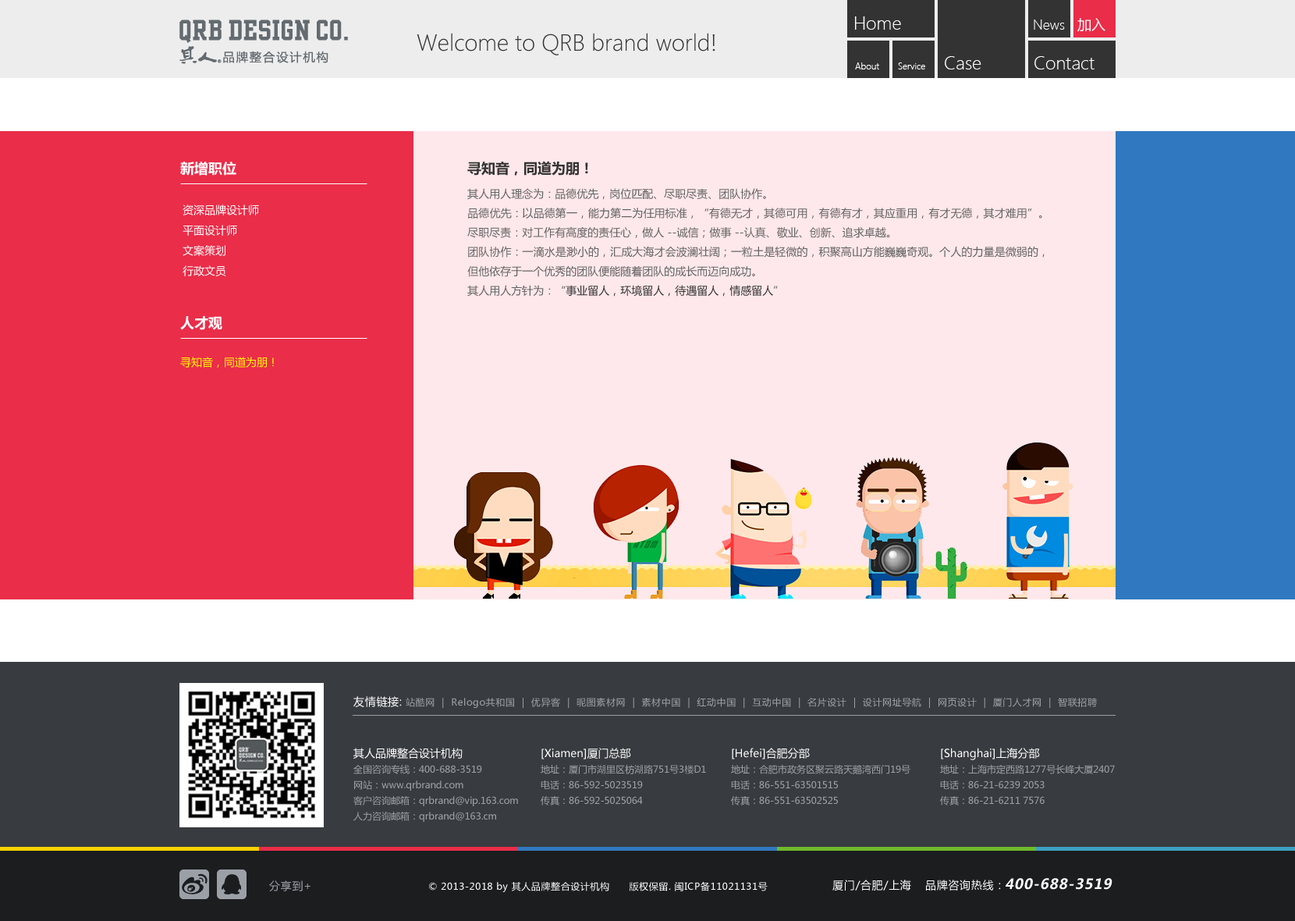
<style>
.page{position:relative;width:1295px;height:921px}
.page>*{position:absolute;margin:0}
.t1{font:18.7px "SegoeUI-Light";color:#ffffff}
.t2{font:14px "MicrosoftYaHei";color:#ffffff}
.t3{font:14px "SegoeUI-Light";color:#ffffff}
.t4{font:23.4px "SegoeUI-Light";color:#333333}
.t5{font:9.4px "SegoeUI-Light";color:#ffffff}
.t6{font:14px "MicrosoftYaHei-Bold";color:#ffffff}
.t7{font:14px "MicrosoftYaHei-Bold";color:#333333}
.t8{font:10.9px/19.3px "MicrosoftYaHei";color:#646464}
.t9{font:10.9px/19.3px "MicrosoftYaHei";color:#333333}
.t10{font:10.9px/20.3px "MicrosoftYaHei";color:#ffffff}
.t11{font:10.9px "MicrosoftYaHei";color:#ffff00}
.t12{font:9.4px "MicrosoftYaHei";letter-spacing:0.05em;color:#9ba0a7}
.t13{font:10.9px "MicrosoftYaHei";letter-spacing:0.05em;color:#ffffff}
.t14{font:9.4px/15.6px "MicrosoftYaHei";color:#9ba0a7}
.t15{font:10.9px/15.6px "MicrosoftYaHei";color:#ffffff}
.t16{font:10.9px "MicrosoftYaHei";letter-spacing:0.05em;color:#9ba0a7}
.t17{font:9.4px "MicrosoftYaHei";letter-spacing:0.05em;color:#ffffff}
.t18{font:14px "MicrosoftYaHei-Bold";letter-spacing:0.05em;color:#ffffff;font-style:italic}
</style>
<div class="page">
<p class="t1" style="left:855px;top:16px;width:46px;height:14px">Home</p>
<p class="t2" style="left:1077px;top:18px;width:29px;height:14px">加入</p>
<p class="t3" style="left:1034px;top:20px;width:31px;height:10px">News</p>
<p class="t4" style="left:417px;top:33px;width:298px;height:22px">Welcome to QRB brand world!</p>
<p class="t5" style="left:855px;top:62px;width:24px;height:7px">About</p>
<p class="t5" style="left:898px;top:62px;width:27px;height:7px">Service</p>
<p class="t1" style="left:945px;top:56px;width:37px;height:13px">Case</p>
<p class="t1" style="left:1035px;top:56px;width:60px;height:13px">Contact</p>
<p class="t6" style="left:180px;top:162px;width:56px;height:14px">新增职位</p>
<p class="t7" style="left:467px;top:161px;width:121px;height:15px">寻知音，同道为朋！</p>
<p class="t8" style="left:467px;top:188px;width:578px;height:108px;text-align:justify">其人用人理念为：品德优先，岗位匹配、尽职尽责、团队协作。<br>品德优先：以品德第一，能力第二为任用标准，“有德无才，其德可用，有德有才，其应重用，有才无德，其才难用”。尽职尽责：对工作有高度的责任心，做人 --诚信；做事 --认真、敬业、创新、追求卓越。<br>团队协作：一滴水是渺小的，汇成大海才会波澜壮阔；一粒土是轻微的，积聚高山方能巍巍奇观。个人的力量是微弱的，但他依存于一个优秀的团队便能随着团队的成长而迈向成功。<br>其人用人方针为：“<span class="t9">事业留人，环境留人，待遇留人，情感留人</span>”</p>
<p class="t10" style="left:183px;top:204px;width:76px;height:72px">资深品牌设计师<br>平面设计师<br>文案策划<br>行政文员</p>
<p class="t6" style="left:180px;top:316px;width:42px;height:14px">人才观</p>
<p class="t11" style="left:180px;top:357px;width:94px;height:10px">寻知音，同道为朋！</p>
<p class="t12" style="left:353px;top:696px;width:744px;height:12px"><span class="t13">友情链接: </span>站酷网  |  Relogo共和国  |  优异客  |  昵图素材网  |  素材中国  |  红动中国  |  互动中国  |  名片设计  |  设计网址导航  |  网页设计  |  厦门人才网  |  智联招聘</p>
<p class="t14" style="left:353px;top:747px;width:165px;height:75px"><span class="t15">其人品牌整合设计机构<br></span>全国咨询专线：400-688-3519<br>网站：www.qrbrand.com<br>客户咨询邮箱：qrbrand@vip.163.com<br>人力咨询邮箱：qrbrand@163.cm</p>
<p class="t14" style="left:541px;top:747px;width:165px;height:58px"><span class="t15">[Xiamen]厦门总部<br></span>地址：厦门市湖里区枋湖路751号3楼D1<br>电话：86-592-5023519<br>传真：86-592-5025064</p>
<p class="t14" style="left:731px;top:747px;width:180px;height:58px"><span class="t15">[Hefei]合肥分部<br></span>地址：合肥市政务区聚云路天鹅湾西门19号<br>电话：86-551-63501515<br>传真：86-551-63502525</p>
<p class="t14" style="left:940px;top:747px;width:175px;height:58px"><span class="t15">[Shanghai]上海分部<br></span>地址：上海市定西路1277号长峰大厦2407<br>电话：86-21-6239 2053<br>传真：86-21-6211 7576</p>
<p class="t16" style="left:269px;top:880px;width:42px;height:11px">分享到+</p>
<p class="t17" style="left:429px;top:881px;width:339px;height:11px">© 2013-2018 by 其人品牌整合设计机构      版权保留. 闽ICP备11021131号</p>
<p class="t13" style="left:833px;top:879px;width:78px;height:11px">厦门/合肥/上海</p>
<p class="t13" style="left:926px;top:879px;width:75px;height:11px">品牌咨询热线：</p>
<p class="t18" style="left:1006px;top:878px;width:107px;height:11px">400-688-3519</p>
</div>
